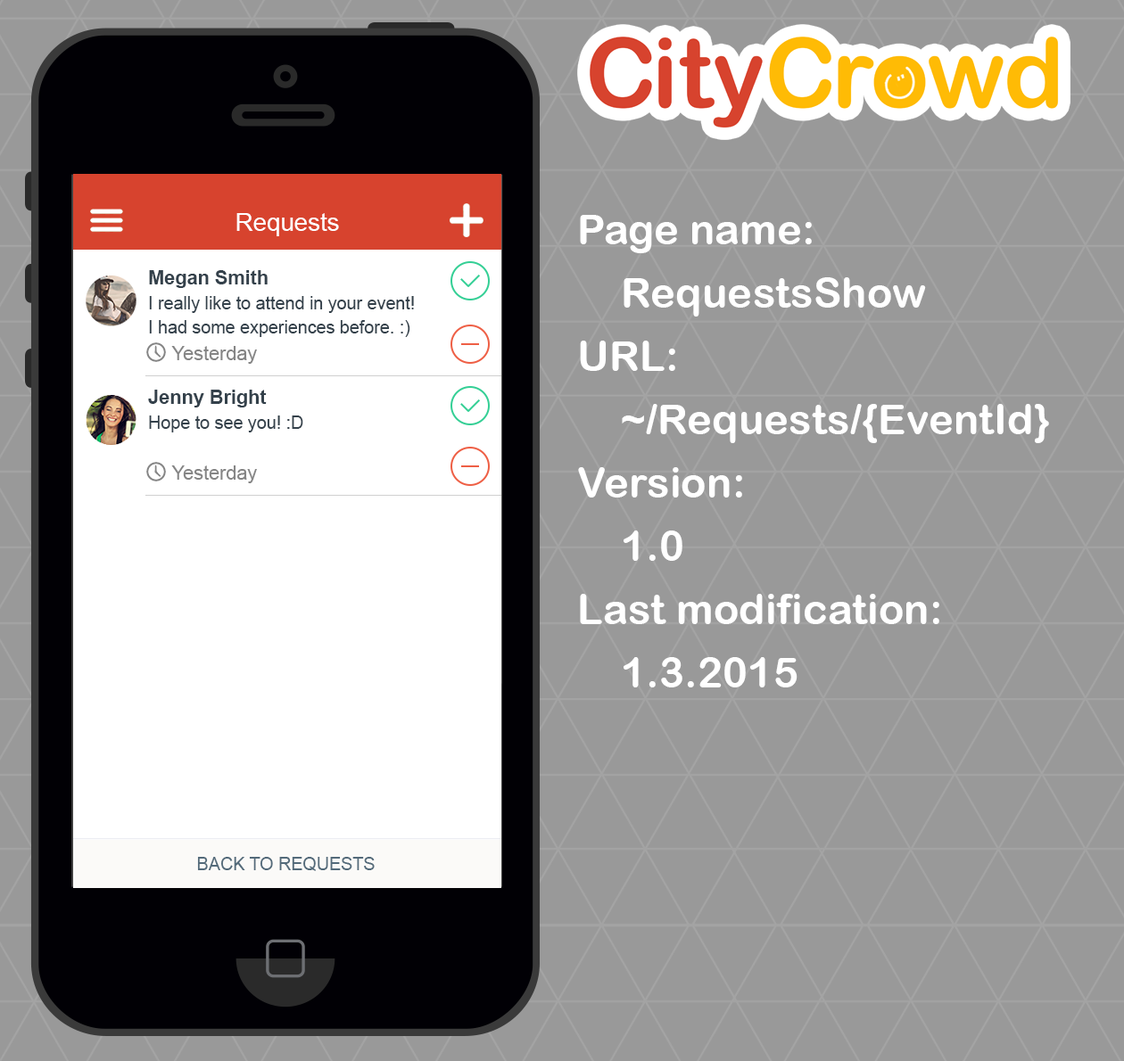
<style>
.page{position:relative;width:1124px;height:1061px;background:#999999}
.page>*{position:absolute;margin:0}
.t1{font:24.6px "ArialMT";color:#ffffff}
.t2{font:42.2px/63.3px "ArialRoundedMTBold";color:#ffffff}
.t3{font:17.6px/24.6px "ArialMT";color:#34414b}
.t4{font:19.3px/24.6px "Arial-BoldMT";color:#34414b}
.t5{font:19.3px "ArialMT";color:#858585}
.t6{font:17.6px "ArialMT";color:#536a7a}
</style>
<div class="page">
<p class="t1" style="left:236px;top:213px;width:103px;height:23px">Requests</p>
<p class="t2" style="left:578px;top:215px;width:471px;height:473px">Page name:<br>RequestsShow<br>URL:<br>~/Requests/{EventId}<br>Version:<br>1.0<br>Last modification:<br>1.3.2015</p>
<p class="t3" style="left:149px;top:270px;width:265px;height:67px"><span class="t4">Megan Smith<br></span>I really like to attend in your event!<br>I had some experiences before. :)</p>
<p class="t5" style="left:171px;top:346px;width:86px;height:18px">Yesterday</p>
<p class="t3" style="left:148px;top:390px;width:155px;height:43px"><span class="t4">Jenny Bright<br></span>Hope to see you! :D</p>
<p class="t5" style="left:171px;top:466px;width:86px;height:17px">Yesterday</p>
<p class="t6" style="left:197px;top:857px;width:178px;height:14px">BACK TO REQUESTS</p>
</div>
